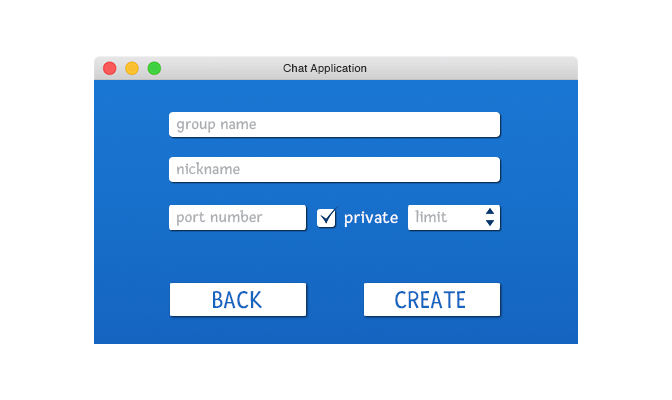
<style>
.page{position:relative;width:672px;height:400px;background:#ffffff}
.page>*{position:absolute;margin:0}
.t1{font:11px "Helvetica";letter-spacing:0.025em;color:#292828}
.t2{font:16.1px "Fresca-Regular";letter-spacing:0.025em;color:#a9adb1}
.t3{font:18px "Fresca-Regular";letter-spacing:0.025em;color:#ffffff}
.t4{font:26.1px "Fresca-Regular";letter-spacing:0.025em;color:#1565c0}
</style>
<div class="page">
<p class="t1" style="left:283px;top:64px;width:84px;height:10px">Chat Application</p>
<p class="t2" style="left:176px;top:121px;width:80px;height:12px">group name</p>
<p class="t2" style="left:177px;top:162px;width:63px;height:13px">nickname</p>
<p class="t2" style="left:177px;top:210px;width:86px;height:16px">port number</p>
<p class="t3" style="left:344px;top:211px;width:54px;height:17px">private</p>
<p class="t2" style="left:415px;top:210px;width:33px;height:13px">limit</p>
<p class="t4" style="left:213px;top:290px;width:49px;height:19px">BACK</p>
<p class="t4" style="left:395px;top:291px;width:70px;height:18px">CREATE</p>
</div>
